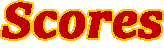
<style>
.page{position:relative;width:164px;height:48px;background:#ffffff}
.page>*{position:absolute;margin:0}
.t1{font:52.9px "SitkaText-BoldItalic";color:#c00007;font-weight:bold;scale:0.93 1}
</style>
<div class="page">
<p class="t1" style="left:2px;top:2px;width:160px;height:37px">Scores</p>
</div>
